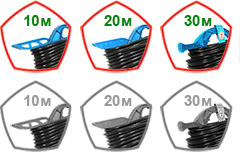
<style>
.page{position:relative;width:240px;height:153px;background:#fefffe}
.page>*{position:absolute;margin:0}
.t1{font:14.6px "Arial-BoldMT";letter-spacing:0.05em;color:#038212}
.t2{font:14.6px "Arial-BoldMT";color:#038212}
.t3{font:14.6px "Arial-BoldMT";letter-spacing:0.05em;color:#999999}
.t4{font:14.6px "Arial-BoldMT";color:#999999}
</style>
<div class="page">
<p class="t1" style="left:24px;top:15px;width:27px;height:11px"><span class="t2">1</span>0м</p>
<p class="t1" style="left:104px;top:15px;width:28px;height:11px"><span class="t2">2</span>0м</p>
<p class="t1" style="left:184px;top:15px;width:28px;height:11px"><span class="t2">3</span>0м</p>
<p class="t3" style="left:24px;top:95px;width:27px;height:11px"><span class="t4">1</span>0м</p>
<p class="t3" style="left:104px;top:95px;width:28px;height:11px"><span class="t4">2</span>0м</p>
<p class="t3" style="left:184px;top:95px;width:28px;height:11px"><span class="t4">3</span>0м</p>
</div>
